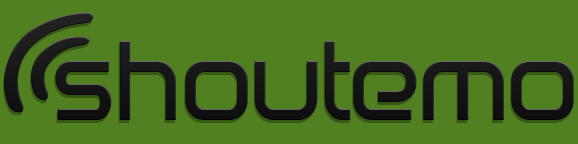
<style>
.page{position:relative;width:578px;height:144px;background:#508020}
.page>*{position:absolute;margin:0}
.t1{font:96px "BirdmanBold";letter-spacing:-0.01em;color:#181717}
</style>
<div class="page">
<p class="t1" style="left:55px;top:41px;width:519px;height:79px">shoutemo</p>
</div>
